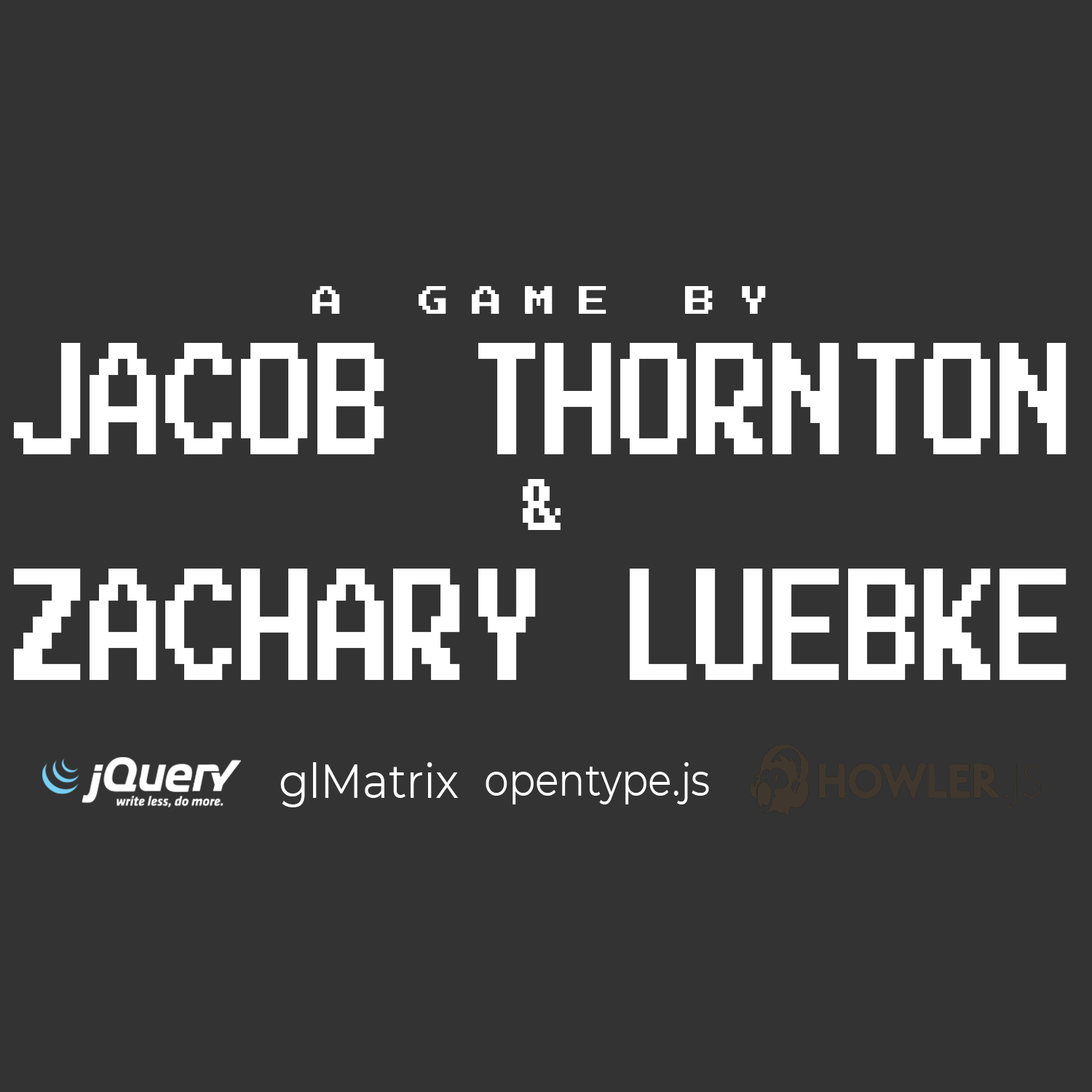
<style>
.page{position:relative;width:1092px;height:1092px;background:#333333}
.page>*{position:absolute;margin:0}
.t1{font:31px "PressStart2P-Regular";letter-spacing:0.72em;color:#ffffff;text-transform:uppercase}
.t2{font:127px/131.6px "PressStart2P-Regular";color:#ffffff;text-transform:uppercase;scale:0.6 1}
.t3{font:57.8px/67.2px "PressStart2P-Regular";color:#ffffff;text-transform:uppercase;scale:0.75 1}
.t4{font:127px/158.4px "PressStart2P-Regular";color:#ffffff;text-transform:uppercase;scale:0.6 1}
.t5{font:47.8px "Montserrat-Regular";color:#ffffff;scale:0.92 1}
.t6{font:45.4px "Montserrat-Regular";color:#ffffff;scale:0.86 1}
</style>
<div class="page">
<p class="t1" style="left:312px;top:286px;width:454px;height:28px">a game by</p>
<p class="t2" style="left:14px;top:343px;width:1053px;height:337px;text-align:center">Jacob Thornton<br><span class="t3">&amp;<br></span><span class="t4">Zachary luebke</span></p>
<p class="t5" style="left:280px;top:762px;width:179px;height:45px">glMatrix</p>
<p class="t6" style="left:486px;top:762px;width:223px;height:42px">opentype.js</p>
</div>
